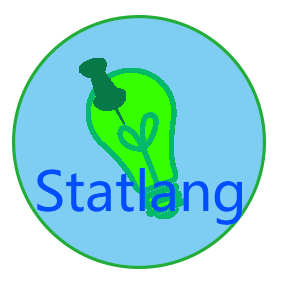
<style>
.page{position:relative;width:283px;height:283px;background:#7ecef4}
.page>*{position:absolute;margin:0}
.t1{font:53.9px "MicrosoftYaHei";color:#004eff}
</style>
<div class="page">
<p class="t1" style="left:37px;top:167px;width:205px;height:58px">Statlang</p>
</div>
